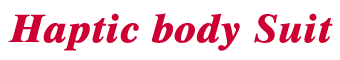
<style>
.page{position:relative;width:340px;height:60px;background:#ffffff}
.page>*{position:absolute;margin:0}
.t1{font:40px "Dutch801BT-ExtraBoldItalic";letter-spacing:0.025em;color:#cc0033}
</style>
<div class="page">
<p class="t1" style="left:8px;top:13px;width:325px;height:38px">Haptic body Suit</p>
</div>
